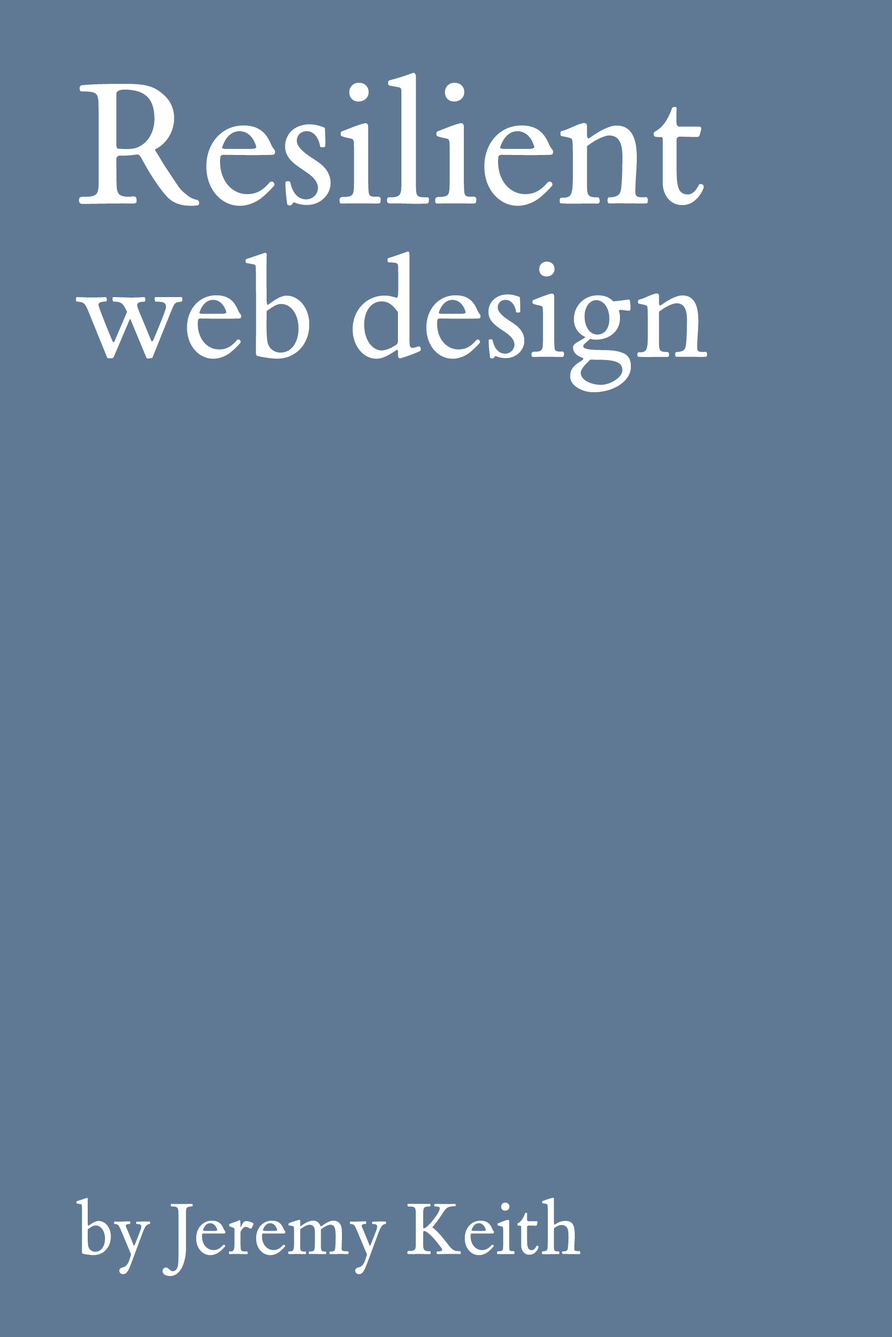
<style>
.page{position:relative;width:892px;height:1337px;background:#5f7995}
.page>*{position:absolute;margin:0}
.t1{font:142.7px/153.6px "ETBookOT-Roman";color:#ffffff}
.t2{font:180.8px/153.6px "ETBookOT-Roman";color:#ffffff}
.t3{font:76.8px "ETBookOT-Roman";color:#ffffff}
</style>
<div class="page">
<p class="t1" style="left:76px;top:73px;width:631px;height:319px"><span class="t2">Resilient</span><br>web design</p>
<p class="t3" style="left:76px;top:1198px;width:504px;height:78px">by Jeremy Keith</p>
</div>
